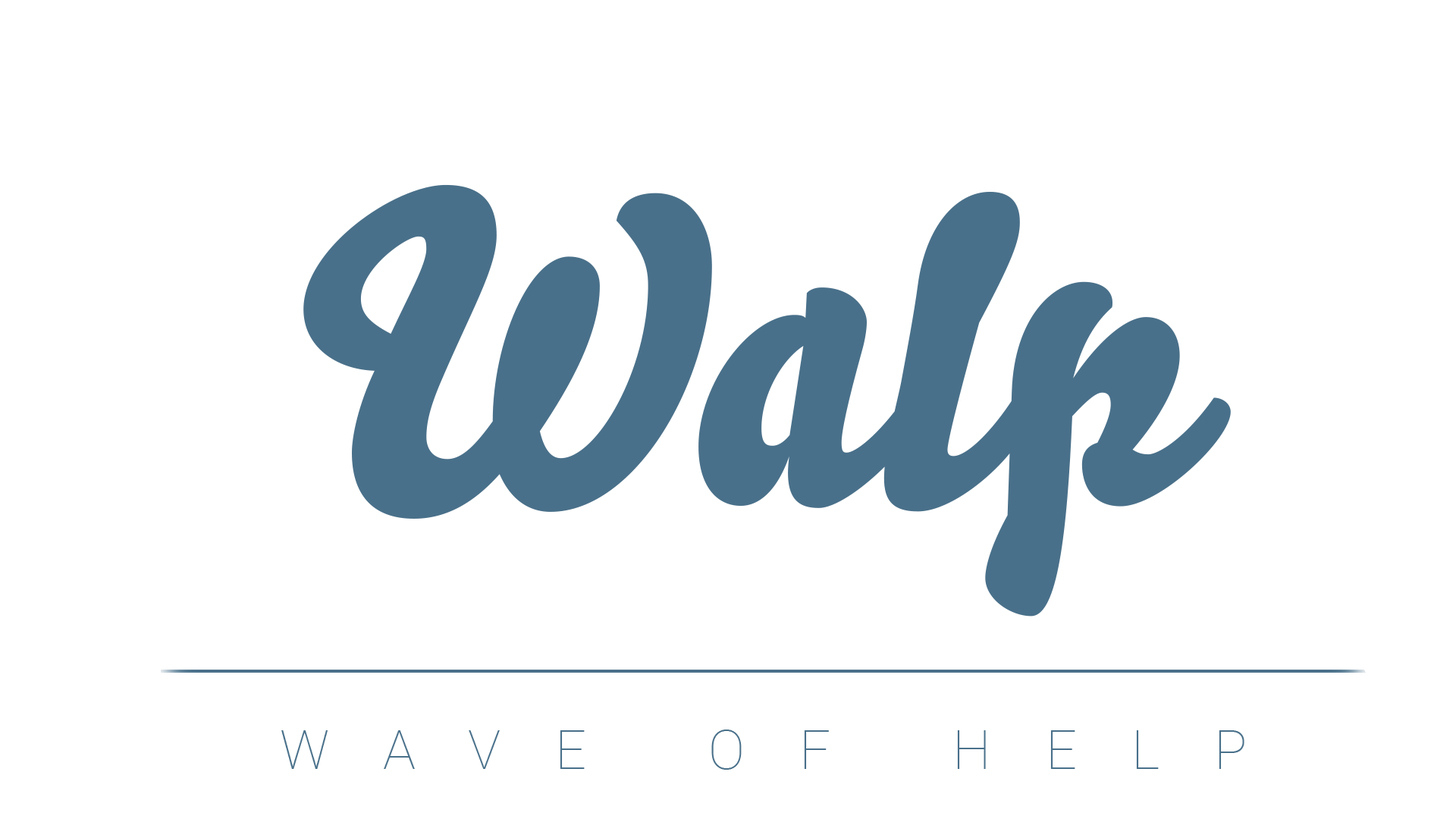
<style>
.page{position:relative;width:1456px;height:819px;background:#ffffff}
.page>*{position:absolute;margin:0}
.t1{font:428.9px "Bello-Pro";color:#49708a}
.t2{font:54.6px "Roboto-Thin";letter-spacing:1em;color:#49708a}
</style>
<div class="page">
<p class="t1" style="left:303px;top:184px;width:928px;height:433px">Walp</p>
<p class="t2" style="left:281px;top:730px;width:963px;height:40px">WAVE OF HELP</p>
</div>
